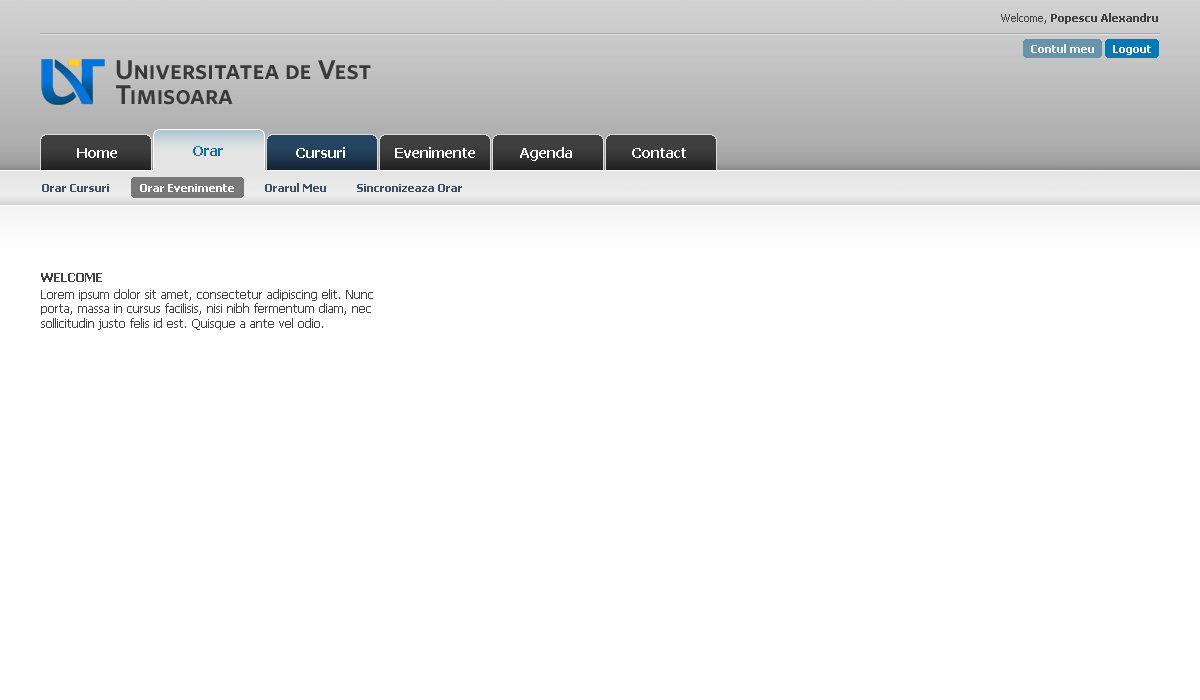
<style>
.page{position:relative;width:1200px;height:700px;background:#ffffff}
.page>*{position:absolute;margin:0}
.t1{font:11px "Tahoma-Bold";color:#404040}
.t2{font:11px "Tahoma";color:#404040}
.t3{font:11px "Tahoma-Bold";color:#fefefe}
.t4{font:14px "Tahoma-Bold";color:#ffffff}
.t5{font:14px "Tahoma-Bold";color:#0172ac}
.t6{font:11px "Tahoma-Bold";color:#395067}
.t7{font:11px "Tahoma-Bold";color:#ffffff}
.t8{font:12px "Tahoma";color:#404040}
.t9{font:13px "Tahoma-Bold";color:#404040;text-transform:uppercase}
.t10{font:12px/17px "Tahoma";color:#404040}
</style>
<div class="page">
<p class="t1" style="left:1001px;top:13px;width:157px;height:11px"><span class="t2">Welcome, </span>Popescu Alexandru</p>
<p class="t3" style="left:1031px;top:44px;width:63px;height:9px;opacity:0.9">Contul meu</p>
<p class="t3" style="left:1113px;top:45px;width:38px;height:10px">Logout</p>
<p class="t4" style="left:77px;top:148px;width:40px;height:10px">Home</p>
<p class="t5" style="left:193px;top:146px;width:30px;height:10px">Orar</p>
<p class="t4" style="left:296px;top:147px;width:49px;height:11px">Cursuri</p>
<p class="t4" style="left:395px;top:147px;width:80px;height:11px">Evenimente</p>
<p class="t4" style="left:520px;top:147px;width:52px;height:14px">Agenda</p>
<p class="t4" style="left:632px;top:148px;width:54px;height:10px">Contact</p>
<p class="t6" style="left:42px;top:183px;width:420px;height:9px">Orar Cursuri          <span class="t7">Orar Evenimente</span>          Orarul Meu          Sincronizeaza Orar</p>
<p class="t8" style="left:41px;top:273px;width:332px;height:57px"><span class="t9">Welcome<br></span><span class="t10">Lorem ipsum dolor sit amet, </span>consectetur adipiscing elit. Nunc porta, massa in cursus facilisis, nisi nibh fermentum diam, nec sollicitudin justo felis id est. Quisque a ante vel odio.</p>
</div>
